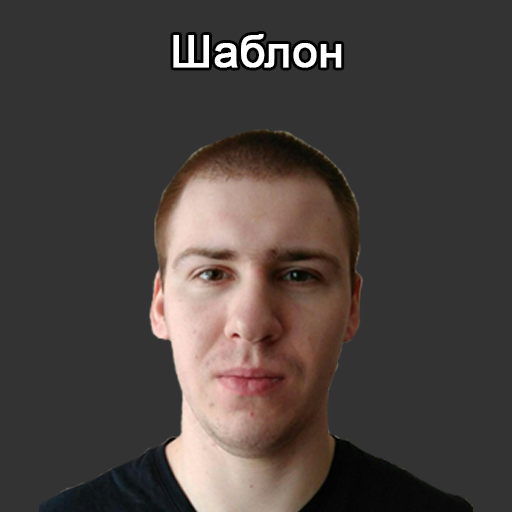
<style>
.page{position:relative;width:512px;height:512px;background:#333333}
.page>*{position:absolute;margin:0}
.t1{font:45px "ArialMT";color:#ffffff;font-weight:bold}
</style>
<div class="page">
<p class="t1" style="left:173px;top:34px;width:169px;height:34px">Шаблон</p>
</div>
